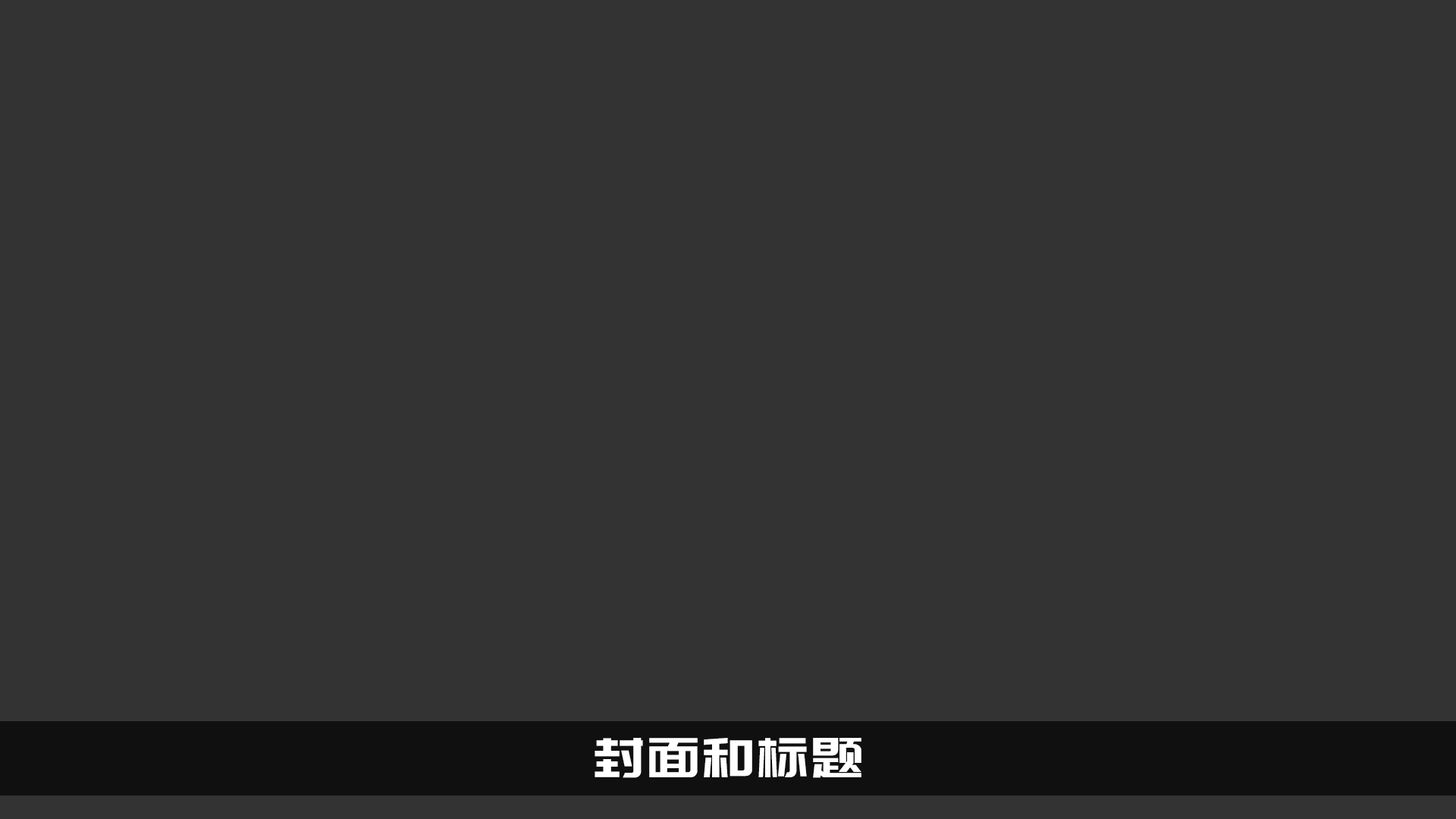
<style>
.page{position:relative;width:1456px;height:819px;background:#333333}
.page>*{position:absolute;margin:0}
.t1{font:54.6px "PangMenZhengDao-3";color:#ffffff}
</style>
<div class="page">
<p class="t1" style="left:595px;top:738px;width:266px;height:40px">封面和标题</p>
</div>
